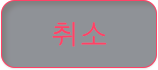
<style>
.page{position:relative;width:158px;height:70px;background:#8f9297}
.page>*{position:absolute;margin:0}
.t1{font:30px "Gulim";letter-spacing:-0.04em;color:#ff4266}
</style>
<div class="page">
<p class="t1" style="left:52px;top:22px;width:55px;height:25px">취소</p>
</div>
